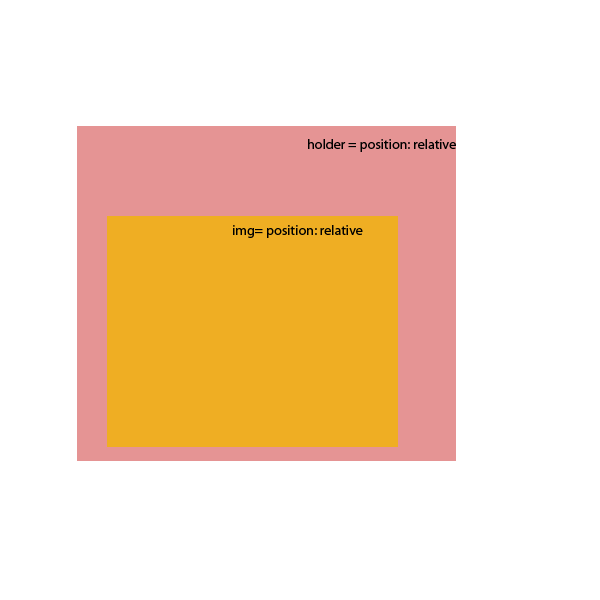
<style>
.page{position:relative;width:600px;height:600px;background:#ffffff}
.page>*{position:absolute;margin:0}
.t1{font:14px "MyriadPro-Regular";color:#000000}
</style>
<div class="page">
<p class="t1" style="left:308px;top:139px;width:148px;height:13px">holder = position: relative</p>
<p class="t1" style="left:233px;top:225px;width:130px;height:13px">img= position: relative</p>
</div>
